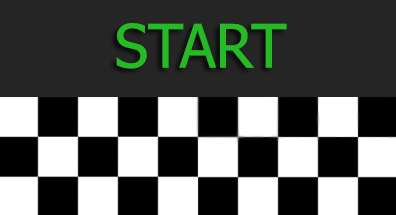
<style>
.page{position:relative;width:396px;height:215px;background:#252525}
.page>*{position:absolute;margin:0}
.t1{font:60px "Tahoma";color:#25bb25}
</style>
<div class="page">
<p class="t1" style="left:116px;top:23px;width:171px;height:46px">START</p>
</div>
